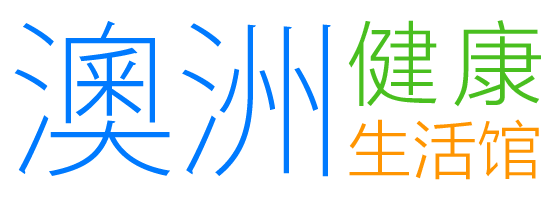
<style>
.page{position:relative;width:560px;height:200px;background:#ffffff}
.page>*{position:absolute;margin:0}
.t1{font:168px "KozGoPr6N-ExtraLight";color:#007aff}
.t2{font:65px/76.9px "FZLTXHK";color:#ff9501}
.t3{font:92px/74.8px "FZLTXHK--GBK1-0";color:#49bf1f}
</style>
<div class="page">
<p class="t1" style="left:14px;top:21px;width:317px;height:156px">澳洲</p>
<p class="t2" style="left:348px;top:20px;width:193px;height:160px"><span class="t3">健康<br></span>生活馆</p>
</div>
